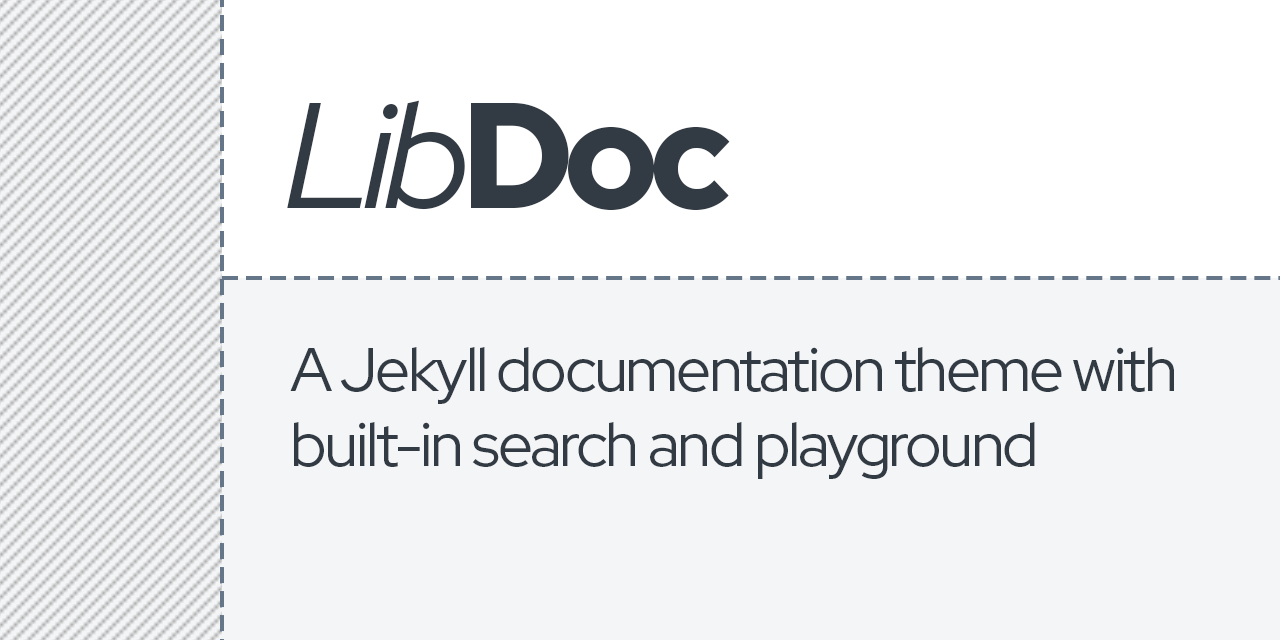
<style>
.page{position:relative;width:1280px;height:640px;background:#f4f5f7}
.page>*{position:absolute;margin:0}
.t1{font:149.9px "RedHatDisplay-Italic";letter-spacing:-0.06em;color:#323b44}
.t2{font:149.9px "RedHatDisplay-Black";letter-spacing:-0.06em;color:#323b44}
.t3{font:62px "RedHatDisplay-Regular";letter-spacing:-0.04em;color:#323b44}
</style>
<div class="page">
<p class="t1" style="left:287px;top:100px;width:443px;height:110px">Lib<span class="t2">Doc</span></p>
<p class="t3" style="left:290px;top:347px;width:884px;height:132px">A Jekyll documentation theme with built-in search and playground</p>
</div>
